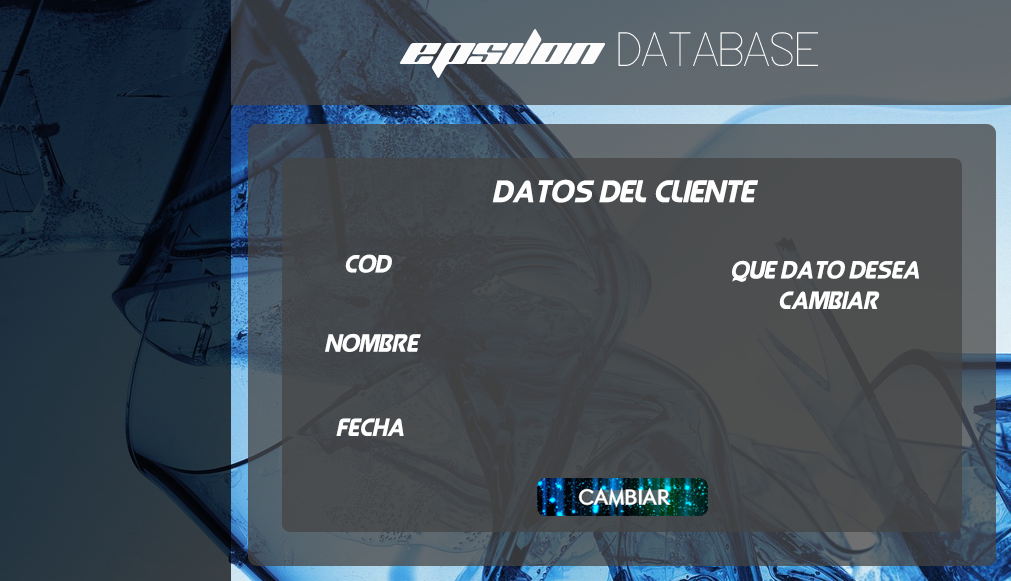
<style>
.page{position:relative;width:1011px;height:581px}
.page>*{position:absolute;margin:0}
.t1{font:32px "QueenofCamelot-Italic";color:#fefefe}
.t2{font:25.4px "QueenofCamelot-Italic";color:#fefefe}
</style>
<div class="page">
<p class="t1" style="left:492px;top:179px;width:266px;height:24px">Datos del cliente</p>
<p class="t2" style="left:345px;top:254px;width:47px;height:19px">Cod</p>
<p class="t2" style="left:732px;top:260px;width:187px;height:49px;text-align:center">Que dato desea <br>cambiar</p>
<p class="t2" style="left:325px;top:333px;width:96px;height:19px">Nombre</p>
<p class="t2" style="left:336px;top:418px;width:68px;height:18px">Fecha</p>
</div>
